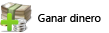
<style>
.page{position:relative;width:109px;height:33px;background:#ffffff}
.page>*{position:absolute;margin:0}
.t1{font:11px "SegoeUI";color:#000000}
</style>
<div class="page">
<p class="t1" style="left:38px;top:14px;width:63px;height:8px">Ganar dinero</p>
</div>
